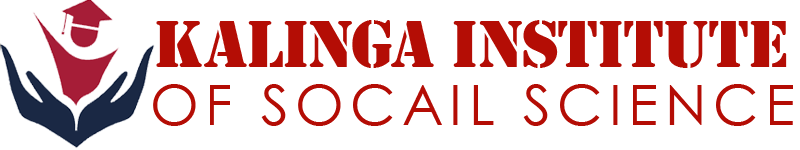
<style>
.page{position:relative;width:800px;height:150px;background:#ffffff}
.page>*{position:absolute;margin:0}
.t1{font:69.4px "Stencil";color:#b40d05}
.t2{font:55.6px "CenturyGothic";letter-spacing:0.12em;color:#b40d05}
</style>
<div class="page">
<p class="t1" style="left:156px;top:20px;width:631px;height:48px">KALINGA INSTITUTE</p>
<p class="t2" style="left:153px;top:84px;width:640px;height:42px">OF SOCAIL SCIENCE</p>
</div>
